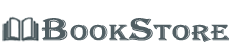
<style>
.page{position:relative;width:229px;height:55px;background:#ffffff}
.page>*{position:absolute;margin:0}
.t1{font:32px "Algerian";color:#505e63;font-variant:small-caps;font-weight:bold;scale:1.32 1}
</style>
<div class="page">
<p class="t1" style="left:41px;top:18px;width:189px;height:24px">BookStore</p>
</div>
